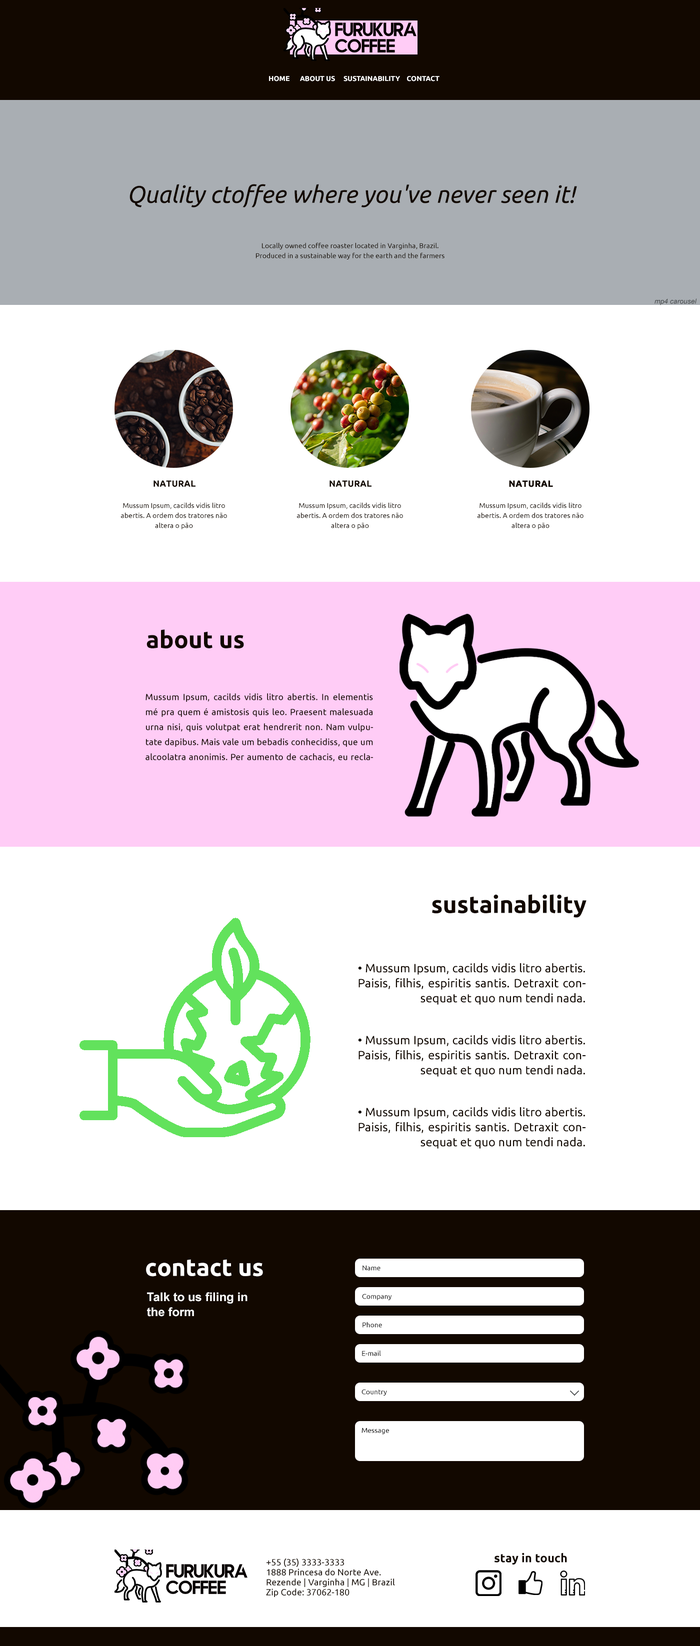
<style>
.page{position:relative;width:700px;height:1646px;background:#ffffff}
.page>*{position:absolute;margin:0}
.t1{font:7px "Ubuntu-Bold";color:#ffffff;text-transform:uppercase}
.t2{font:24px "Ubuntu-Italic";color:#120800}
.t3{font:7px/10px "Ubuntu-Regular";color:#120800}
.t4{font:7px/10px "Ubuntu-Regular";color:#484b4d}
.t5{font:7px "Arial-ItalicMT";color:#484b4d}
.t6{font:9px "Ubuntu-Bold";color:#120800}
.t7{font:9px "Ubuntu-Bold";color:#120800;font-weight:bold}
.t8{font:24px "Ubuntu-Bold";color:#120800}
.t9{font:9px/15px "Ubuntu-Regular";color:#120800}
.t10{font:12px/15px "Ubuntu-Regular";color:#120800}
.t11{font:24px "Ubuntu-Bold";color:#ffffff}
.t12{font:7px "Ubuntu-Regular";color:#000000}
.t13{font:12px/15px "Arial-BoldMT";color:#ffffff}
.t14{font:12px "Ubuntu-Bold";color:#120800}
.t15{font:9px/10px "Ubuntu-Regular";color:#120800}
</style>
<div class="page">
<p class="t1" style="left:269px;top:76px;width:171px;height:6px">HOME      ABOUT US     SUSTAINABILITY    ContaCT</p>
<p class="t2" style="left:130px;top:184px;width:447px;height:24px">Quality ctoffee where you've never seen it!</p>
<p class="t3" style="left:256px;top:242px;width:188px;height:18px;text-align:center">Locally owned coffee roaster located in Varginha, Brazil.<br>Produced in a sustainable way for the earth and the farmers <span class="t4">alike!</span></p>
<p class="t5" style="left:654px;top:298px;width:43px;height:8px">mp4 carousel</p>
<p class="t6" style="left:154px;top:480px;width:42px;height:7px">NATURAL</p>
<p class="t6" style="left:330px;top:480px;width:42px;height:7px">NATURAL</p>
<p class="t7" style="left:509px;top:480px;width:44px;height:8px">NATURAL</p>
<p class="t3" style="left:121px;top:502px;width:106px;height:28px;text-align:center">Mussum Ipsum, cacilds vidis litro abertis. A ordem dos tratores não altera o pão</p>
<p class="t3" style="left:297px;top:502px;width:106px;height:28px;text-align:center">Mussum Ipsum, cacilds vidis litro abertis. A ordem dos tratores não altera o pão</p>
<p class="t3" style="left:478px;top:502px;width:106px;height:28px;text-align:center">Mussum Ipsum, cacilds vidis litro abertis. A ordem dos tratores não altera o pão</p>
<p class="t8" style="left:146px;top:630px;width:98px;height:19px">about us</p>
<p class="t9" style="left:146px;top:694px;width:227px;height:68px;text-align:justify">Mussum Ipsum, cacilds vidis litro abertis. In elementis mé pra quem é amistosis quis leo. Praesent malesuada urna nisi, quis volutpat erat hendrerit non. Nam vulputate dapibus. Mais vale um bebadis conhecidiss, que um alcoolatra anonimis. Per aumento de cachacis, eu reclamis.</p>
<p class="t8" style="left:432px;top:894px;width:154px;height:24px">sustainability</p>
<p class="t10" style="left:358px;top:963px;width:228px;height:42px;text-align:justify">• Mussum Ipsum, cacilds vidis litro abertis. Paisis, filhis, espiritis santis. Detraxit consequat et quo num tendi nada.</p>
<p class="t10" style="left:358px;top:1035px;width:228px;height:42px;text-align:justify">• Mussum Ipsum, cacilds vidis litro abertis. Paisis, filhis, espiritis santis. Detraxit consequat et quo num tendi nada.</p>
<p class="t10" style="left:358px;top:1107px;width:228px;height:42px;text-align:justify">• Mussum Ipsum, cacilds vidis litro abertis. Paisis, filhis, espiritis santis. Detraxit consequat et quo num tendi nada.</p>
<p class="t11" style="left:146px;top:1260px;width:117px;height:17px">contact us</p>
<p class="t12" style="left:362px;top:1266px;width:18px;height:5px">Name</p>
<p class="t13" style="left:147px;top:1292px;width:101px;height:25px">Talk to us filing in the form</p>
<p class="t12" style="left:362px;top:1294px;width:30px;height:6px">Company</p>
<p class="t12" style="left:362px;top:1322px;width:20px;height:6px">Phone</p>
<p class="t12" style="left:362px;top:1350px;width:19px;height:6px">E-mail</p>
<p class="t12" style="left:362px;top:1390px;width:25px;height:6px">Country</p>
<p class="t12" style="left:362px;top:1428px;width:27px;height:6px">Message</p>
<p class="t14" style="left:494px;top:1553px;width:73px;height:12px">stay in touch</p>
<p class="t15" style="left:266px;top:1558px;width:129px;height:40px">+55 (35) 3333-3333<br>1888 Princesa do Norte Ave.<br>Rezende | Varginha | MG | Brazil<br>Zip Code: 37062-180</p>
</div>
